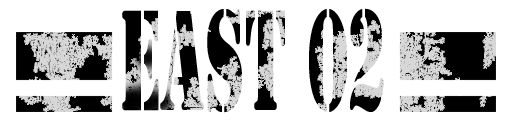
<style>
.page{position:relative;width:512px;height:128px;background:#ffffff}
.page>*{position:absolute;margin:0}
.t1{font:132px "StencilStd";scale:0.47 1}
</style>
<div class="page">
<p class="t1" style="left:122px;top:8px;width:262px;height:105px">EAST 02</p>
</div>
